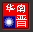
<style>
.page{position:relative;width:33px;height:32px;background:#f20000}
.page>*{position:absolute;margin:0}
.t1{font:10.4px "SimSun";color:#ffffff}
.t2{font:11.7px "SimSun";color:#ffffff}
</style>
<div class="page">
<p class="t1" style="left:6px;top:4px;width:19px;height:9px">华南</p>
<p class="t2" style="left:16px;top:15px;width:11px;height:12px">晋</p>
</div>
